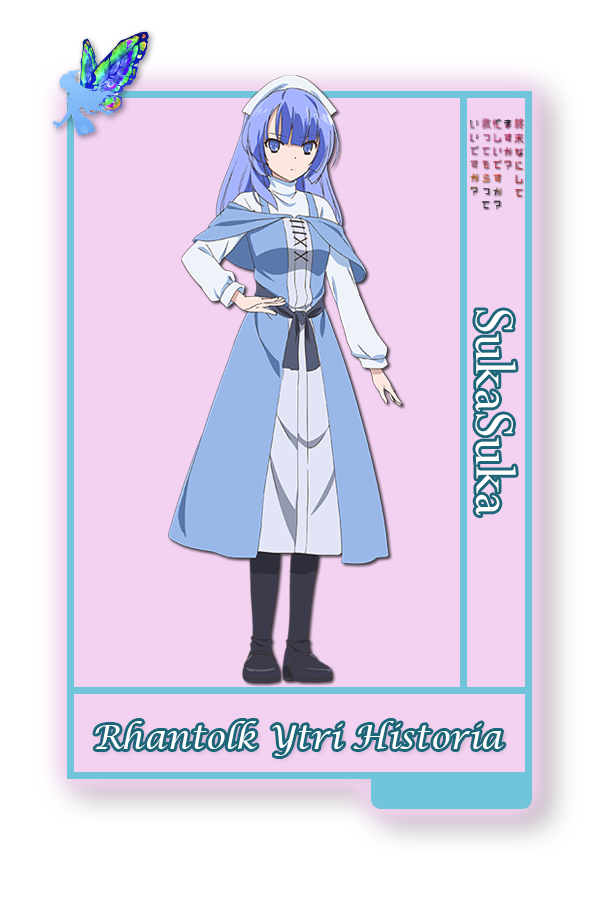
<style>
.page{position:relative;width:600px;height:900px;background:#f3d2f1}
.page>*{position:absolute;margin:0}
.t1{font:62.5px "Perpetua";color:#ffffff}
.t2{font:33.3px "LucidaCalligraphy-Italic";color:#ffffff}
</style>
<div class="page">
<p class="t1" style="left:475px;top:310px;width:41px;height:206px;rotate:90deg">SukaSuka</p>
<p class="t2" style="left:95px;top:721px;width:409px;height:35px">Rhantolk Ytri Historia</p>
</div>
